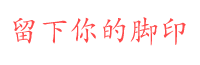
<style>
.page{position:relative;width:200px;height:65px;background:#ffffff}
.page>*{position:absolute;margin:0}
.t1{font:30px "STKaiti";color:#ff4b4b}
</style>
<div class="page">
<p class="t1" style="left:13px;top:17px;width:173px;height:29px">留下你的脚印</p>
</div>
